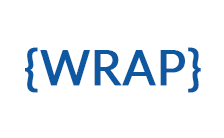
<style>
.page{position:relative;width:224px;height:138px;background:#ffffff}
.page>*{position:absolute;margin:0}
.t1{font:48px "Lato-Regular";color:#0e57a1;font-weight:bold}
</style>
<div class="page">
<p class="t1" style="left:25px;top:47px;width:176px;height:46px">{WRAP}</p>
</div>
